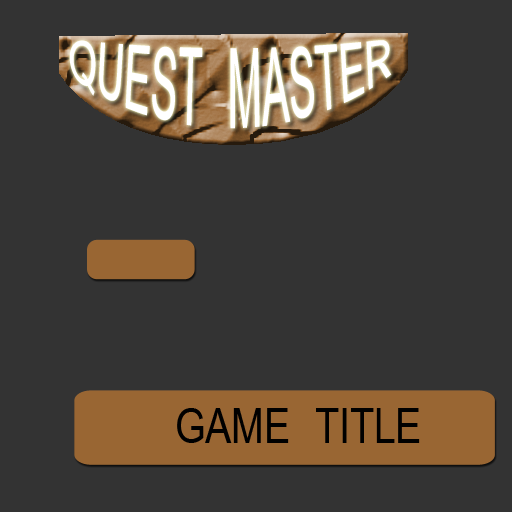
<style>
.page{position:relative;width:512px;height:512px;background:#333333}
.page>*{position:absolute;margin:0}
.t1{font:48px "Revit_HEB_SHX";color:#ffffff}
.t2{font:48px "Revit_HEB_SHX";color:#000000}
</style>
<div class="page">
<p class="t1" style="left:69px;top:40px;width:323px;height:89px">QUEST MASTER</p>
<p class="t2" style="left:177px;top:408px;width:243px;height:35px">GAME TITLE</p>
</div>
